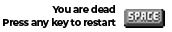
<style>
.page{position:relative;width:172px;height:32px;background:#ffffff}
.page>*{position:absolute;margin:0}
.t1{font:10px/13px "Montserrat-Bold";letter-spacing:-0.04em;color:#000000}
</style>
<div class="page">
<p class="t1" style="left:3px;top:5px;width:113px;height:23px;text-align:right">You are dead<br>Press any key to restart</p>
</div>
